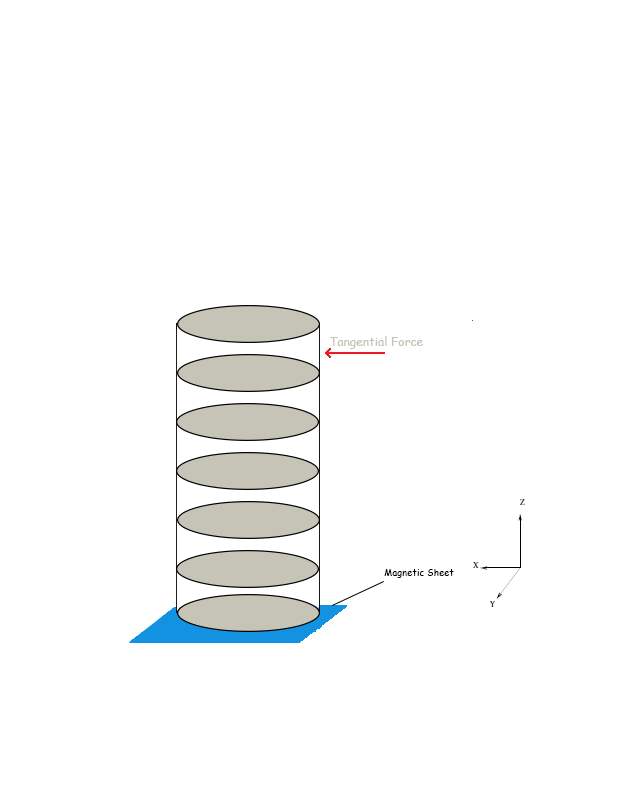
<style>
.page{position:relative;width:640px;height:800px;background:#ffffff}
.page>*{position:absolute;margin:0}
.t1{font:12px "ComicSansMS";color:#c5c4b7}
.t2{font:9.4px "ComicSansMS";color:#000000}
</style>
<div class="page">
<p class="t1" style="left:329px;top:336px;width:94px;height:13px">Tangential Force</p>
<p class="t2" style="left:384px;top:569px;width:70px;height:9px">Magnetic Sheet</p>
</div>
